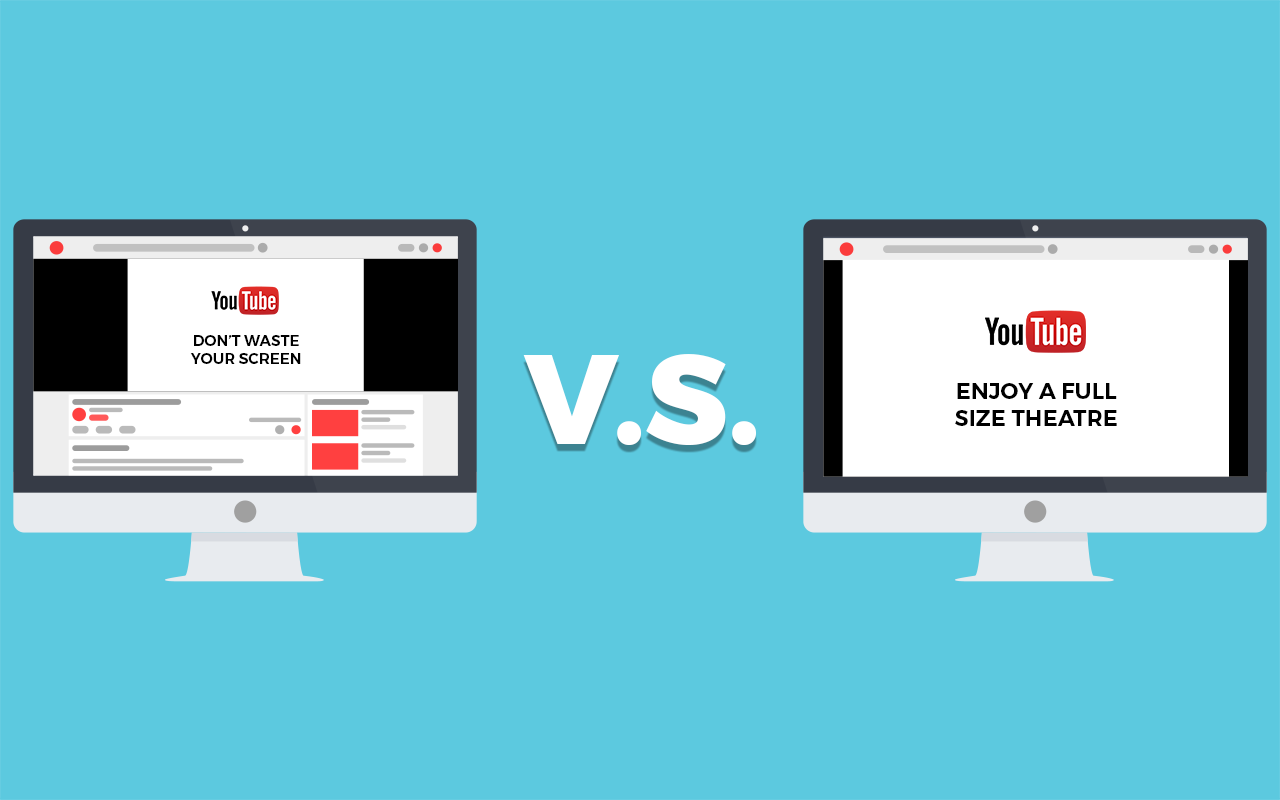
<style>
.page{position:relative;width:1280px;height:800px;background:#5cc9df}
.page>*{position:absolute;margin:0}
.t1{font:15px "Montserrat-SemiBold";color:#000000;text-transform:uppercase}
.t2{font:126.3px "Montserrat-ExtraBold";color:#ffffff;text-transform:uppercase}
.t3{font:22.4px "Montserrat-SemiBold";color:#000000;text-transform:uppercase}
</style>
<div class="page">
<p class="t1" style="left:190px;top:335px;width:111px;height:29px;text-align:center">Don’t waste<br>your screen</p>
<p class="t2" style="left:523px;top:354px;width:233px;height:91px">V.S.</p>
<p class="t3" style="left:955px;top:383px;width:162px;height:43px;text-align:center">Enjoy a full<br>size theatre</p>
</div>
